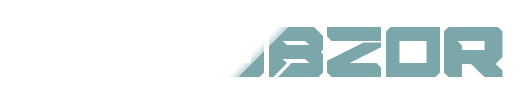
<style>
.page{position:relative;width:524px;height:103px;background:#ffffff}
.page>*{position:absolute;margin:0}
.t1{font:72px "BIGMACCA"}
</style>
<div class="page">
<p class="t1" style="left:12px;top:27px;width:491px;height:50px">KINOOBZOR</p>
</div>
